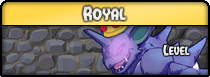
<style>
.page{position:relative;width:210px;height:77px}
.page>*{position:absolute;margin:0}
.t1{font:15.5px "VampireBride";color:#eeeeee}
.t2{font:16.9px "VampireBride";color:#eeeeee}
.t3{font:11.3px "VampireBride";color:#ebebeb}
.t4{font:12.7px "VampireBride";color:#ebebeb}
</style>
<div class="page">
<p class="t1" style="left:83px;top:6px;width:43px;height:15px"><span class="t2">R</span>oyal</p>
<p class="t3" style="left:163px;top:45px;width:27px;height:11px"><span class="t4">L</span>evel</p>
</div>
